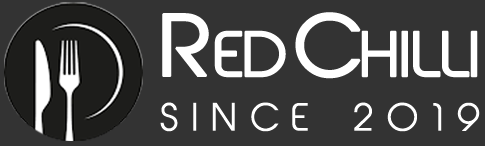
<style>
.page{position:relative;width:485px;height:146px;background:#333333}
.page>*{position:absolute;margin:0}
.t1{font:58px "AbeatbyKai";color:#ffffff;font-weight:bold;scale:1.05 1}
.t2{font:80px "AbeatbyKai";color:#ffffff;font-weight:bold;scale:1.05 1}
.t3{font:58px "AbeatbyKai";color:#fefefe;font-weight:bold;scale:1.05 1}
.t4{font:80px "AbeatbyKai";color:#fefefe;font-weight:bold;scale:1.05 1}
.t5{font:36px "AbeatbyKai";letter-spacing:0.38em;color:#ffffff}
</style>
<div class="page">
<p class="t1" style="left:162px;top:13px;width:124px;height:65px"><span class="t2">R</span>ED</p>
<p class="t3" style="left:295px;top:12px;width:183px;height:67px"><span class="t4">C</span>HILLI</p>
<p class="t5" style="left:160px;top:102px;width:320px;height:30px">SINCE 2019</p>
<p class="t5" style="left:160px;top:102px;width:320px;height:30px">SINCE 2019</p>
</div>
